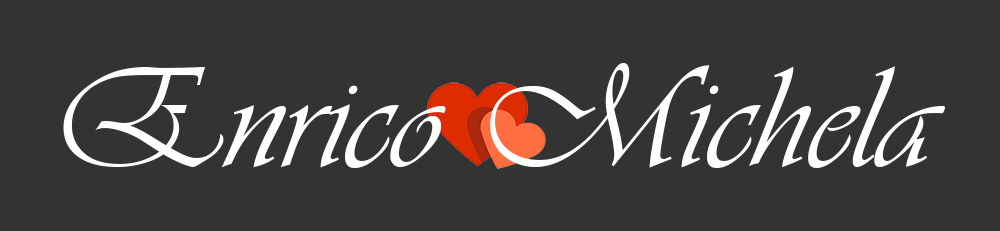
<style>
.page{position:relative;width:1000px;height:231px;background:#333333}
.page>*{position:absolute;margin:0}
.t1{font:150px "Vivaldii";color:#ffffff}
</style>
<div class="page">
<p class="t1" style="left:63px;top:63px;width:882px;height:105px">Enrico Michela</p>
</div>
